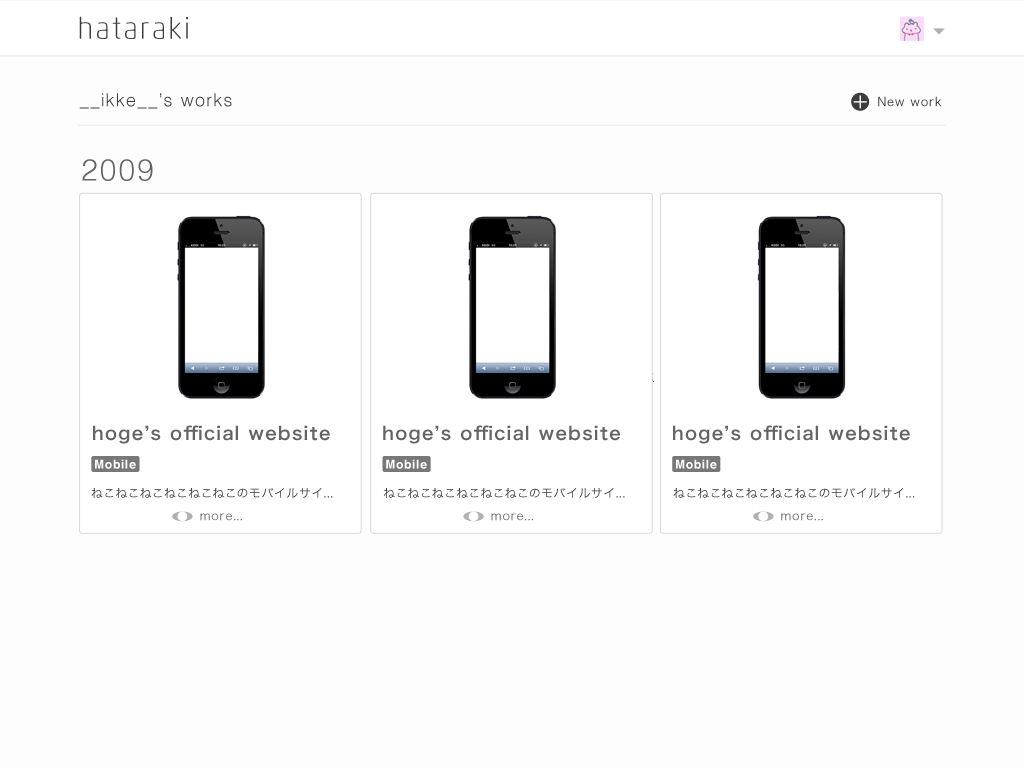
<style>
.page{position:relative;width:1024px;height:768px;background:#fdfdfd}
.page>*{position:absolute;margin:0}
.t1{font:30px "AkkoRoundedPro-Thin";letter-spacing:0.1em;color:#3d3d3d}
.t2{font:18px "Helvetica-Light";letter-spacing:0.1em;color:#3c3c3c}
.t3{font:12px "HiraKakuPro-W3";letter-spacing:0.1em;color:#3c3c3c}
.t4{font:30px "Helvetica-Light";letter-spacing:0.1em;color:#646464}
.t5{font:18px "HiraKakuProN-W6";letter-spacing:0.1em;color:#646464}
.t6{font:12px "Helvetica-Bold";letter-spacing:0.1em;color:#ffffff}
.t7{font:12px "HiraKakuProN-W3";letter-spacing:0.1em;color:#6d6d6d}
</style>
<div class="page">
<p class="t1" style="left:79px;top:16px;width:109px;height:23px">hataraki</p>
<p class="t2" style="left:79px;top:93px;width:153px;height:16px">__ikke__’s works</p>
<p class="t3" style="left:878px;top:96px;width:64px;height:11px">New work</p>
<p class="t4" style="left:82px;top:159px;width:71px;height:22px">2009</p>
<p class="t5" style="left:92px;top:425px;width:238px;height:19px">hoge’s official website</p>
<p class="t5" style="left:383px;top:425px;width:237px;height:19px">hoge’s official website</p>
<p class="t5" style="left:672px;top:425px;width:238px;height:19px">hoge’s official website</p>
<p class="t6" style="left:95px;top:459px;width:41px;height:10px">Mobile</p>
<p class="t6" style="left:386px;top:459px;width:41px;height:10px">Mobile</p>
<p class="t6" style="left:676px;top:459px;width:41px;height:10px">Mobile</p>
<p class="t3" style="left:91px;top:488px;width:242px;height:11px">ねこねこねこねこねこねこのモバイルサイ...</p>
<p class="t3" style="left:383px;top:488px;width:242px;height:11px">ねこねこねこねこねこねこのモバイルサイ...</p>
<p class="t3" style="left:673px;top:488px;width:242px;height:11px">ねこねこねこねこねこねこのモバイルサイ...</p>
<p class="t7" style="left:200px;top:513px;width:42px;height:8px">more...</p>
<p class="t7" style="left:491px;top:513px;width:42px;height:8px">more...</p>
<p class="t7" style="left:781px;top:513px;width:42px;height:8px">more...</p>
</div>
